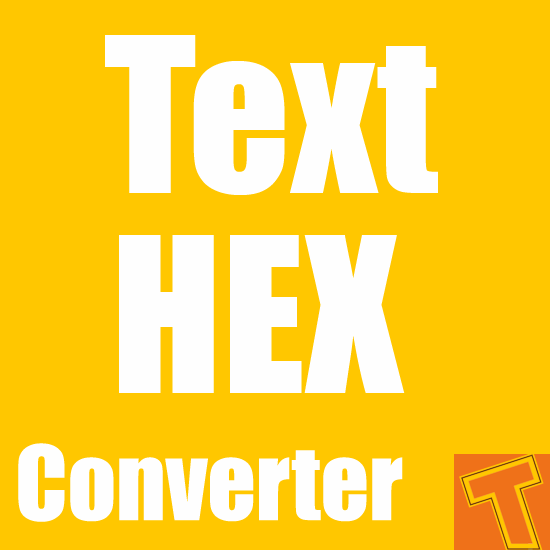
<style>
.page{position:relative;width:550px;height:550px;background:#ffc700}
.page>*{position:absolute;margin:0}
.t1{font:200px "Impact";color:#fefefe}
.t2{font:95px "Impact";color:#fefefe}
</style>
<div class="page">
<p class="t1" style="left:105px;top:35px;width:333px;height:160px">Text</p>
<p class="t1" style="left:119px;top:235px;width:286px;height:158px">HEX</p>
<p class="t2" style="left:18px;top:443px;width:385px;height:79px">Converter</p>
</div>
